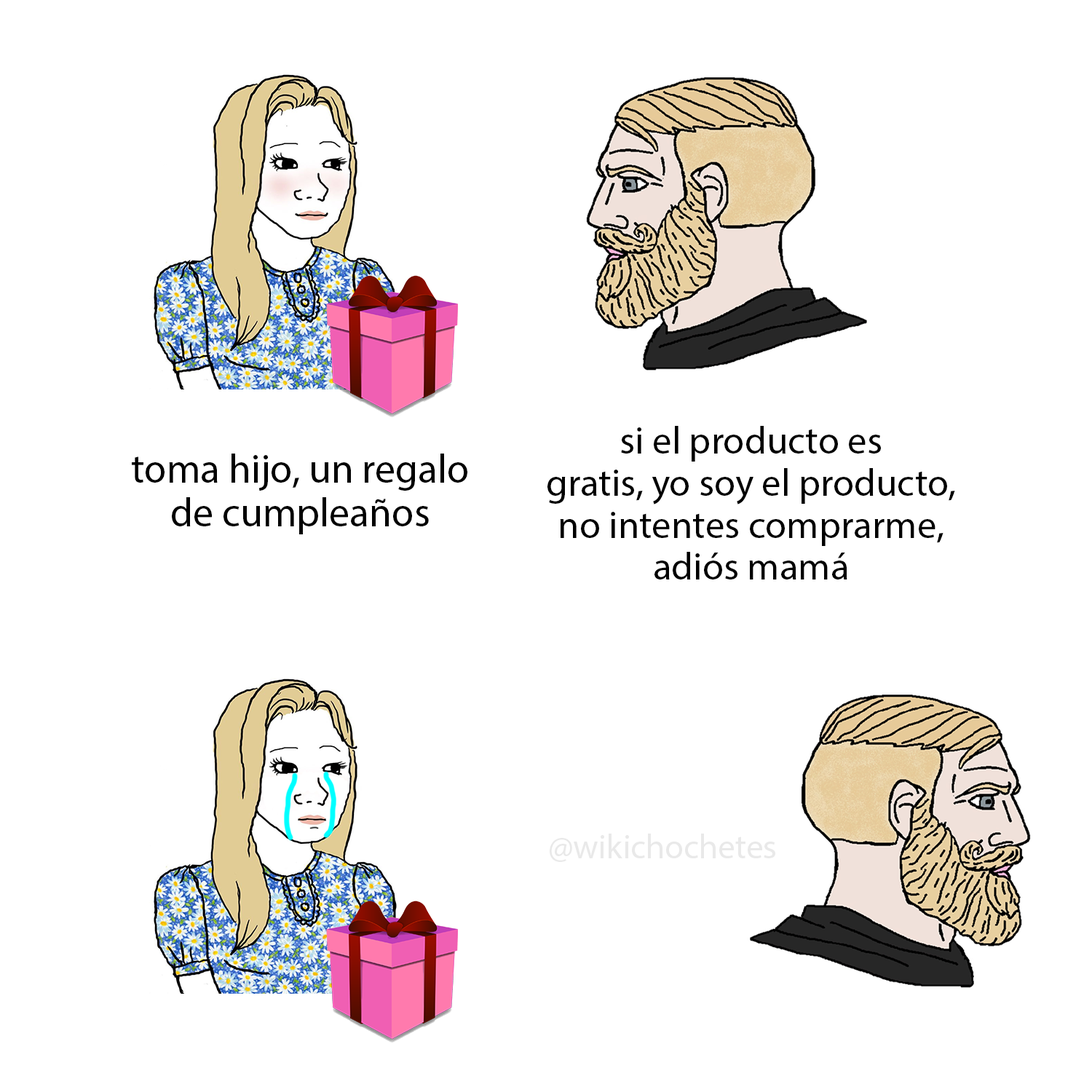
<style>
.page{position:relative;width:1092px;height:1092px;background:#ffffff}
.page>*{position:absolute;margin:0}
.t1{font:38.7px "MyriadPro-Regular";color:#000000}
.t2{font:40.6px "MyriadPro-Regular";color:#000000}
.t3{font:34.1px "MyriadPro-Regular";color:#e9e9e9}
</style>
<div class="page">
<p class="t1" style="left:547px;top:426px;width:408px;height:153px;text-align:center">si el producto es<br>gratis, yo soy el producto,<br>no intentes comprarme,<br>adiós mamá</p>
<p class="t2" style="left:132px;top:454px;width:335px;height:80px;text-align:center">toma hijo, un regalo<br>de cumpleaños</p>
<p class="t3" style="left:550px;top:834px;width:225px;height:28px">@wikichochetes</p>
</div>
